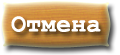
<style>
.page{position:relative;width:120px;height:55px}
.page>*{position:absolute;margin:0}
.t1{font:25px "CourierNewPS-BoldMT";color:#ffffff}
</style>
<div class="page">
<p class="t1" style="left:11px;top:16px;width:90px;height:16px">Отмена</p>
</div>
